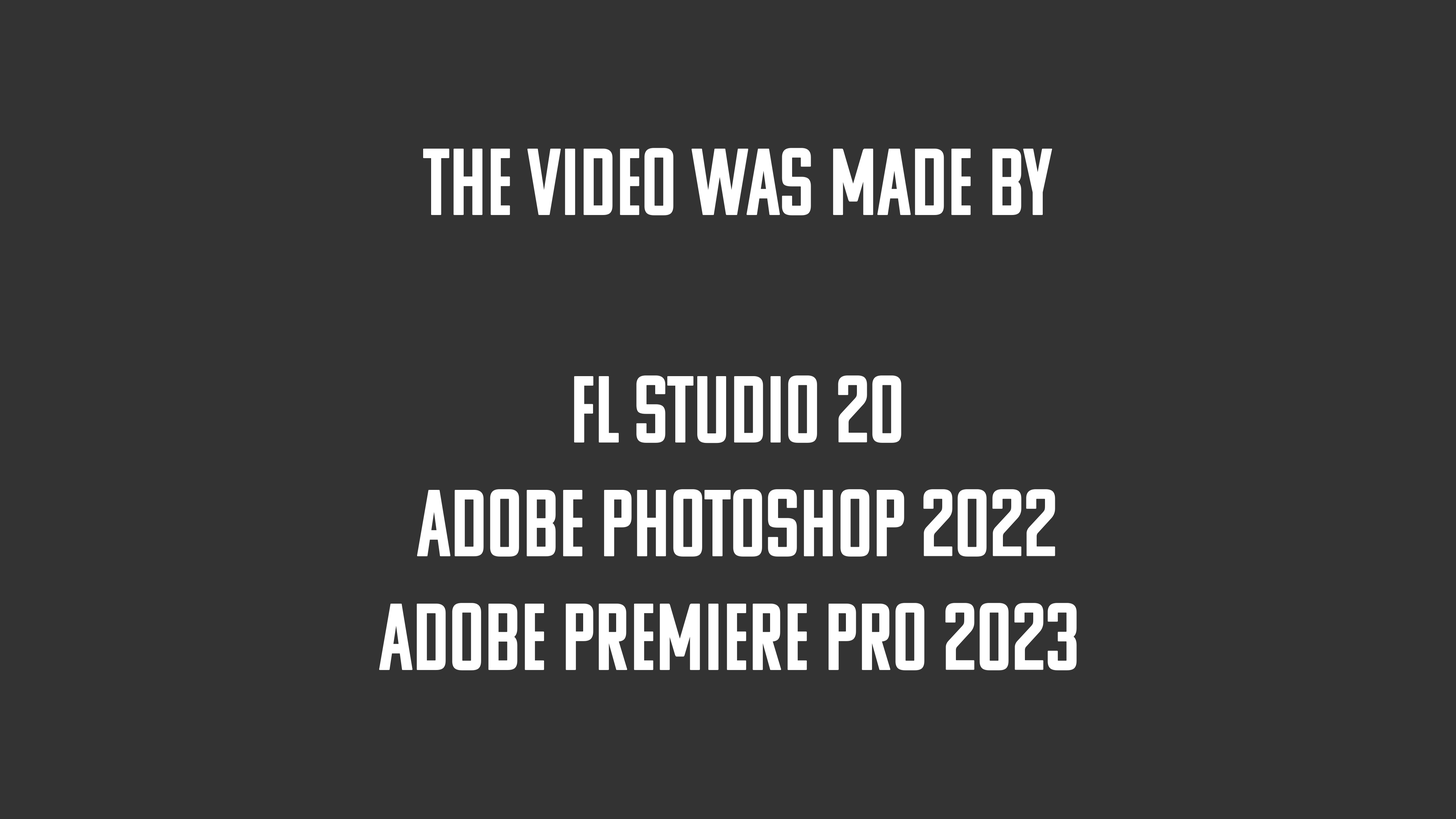
<style>
.page{position:relative;width:1456px;height:819px;background:#333333}
.page>*{position:absolute;margin:0}
.t1{font:94.8px "KomuA";color:#ffffff}
</style>
<div class="page">
<p class="t1" style="left:379px;top:148px;width:698px;height:522px;text-align:center">THE VIDEO WAS MADE BY<br><br>FL STUDIO 20<br>ADOBE PHOTOSHOP 2022<br>ADOBE PREMIERE PRO 2023</p>
</div>
